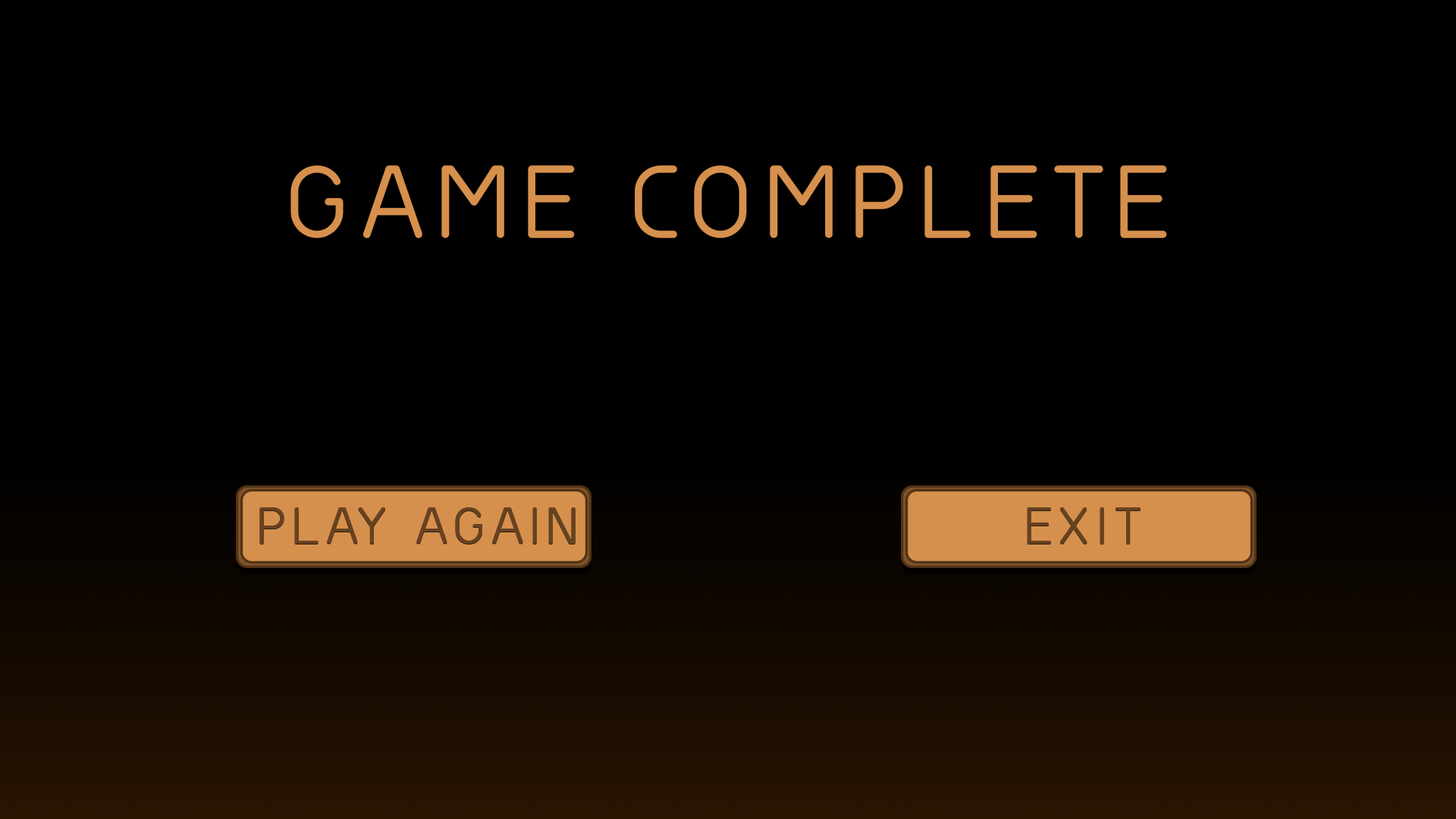
<style>
.page{position:relative;width:1456px;height:819px;background:#000000}
.page>*{position:absolute;margin:0}
.t1{font:91.8px "GreyscaleBasic";letter-spacing:0.15em;color:#d6904d;font-weight:bold}
.t2{font:47px "GreyscaleBasic";letter-spacing:0.15em;color:#674220;font-weight:bold}
</style>
<div class="page">
<p class="t1" style="left:290px;top:165px;width:877px;height:73px">GAME COMPLETE</p>
<p class="t2" style="left:259px;top:507px;width:317px;height:37px">PLAY AGAIN</p>
<p class="t2" style="left:1027px;top:507px;width:114px;height:37px">EXIT</p>
</div>
